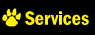
<style>
.page{position:relative;width:95px;height:35px;background:#000000}
.page>*{position:absolute;margin:0}
.t1{font:20px "FranklinGotT-DemCon";color:#fff100}
</style>
<div class="page">
<p class="t1" style="left:25px;top:11px;width:64px;height:14px">Services</p>
</div>
